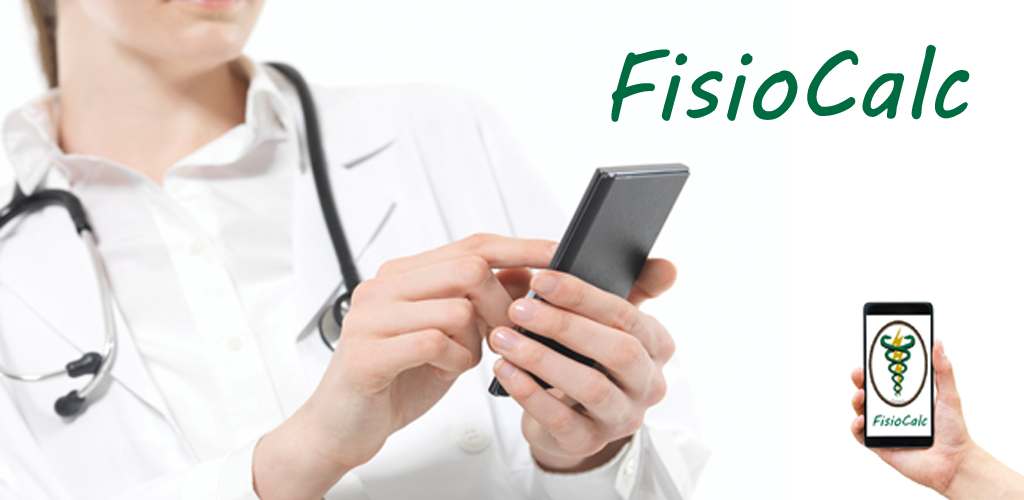
<style>
.page{position:relative;width:1024px;height:500px}
.page>*{position:absolute;margin:0}
.t1{font:98px "MVBoli";color:#006b41}
</style>
<div class="page">
<p class="t1" style="left:611px;top:44px;width:359px;height:78px">FisioCalc</p>
</div>
